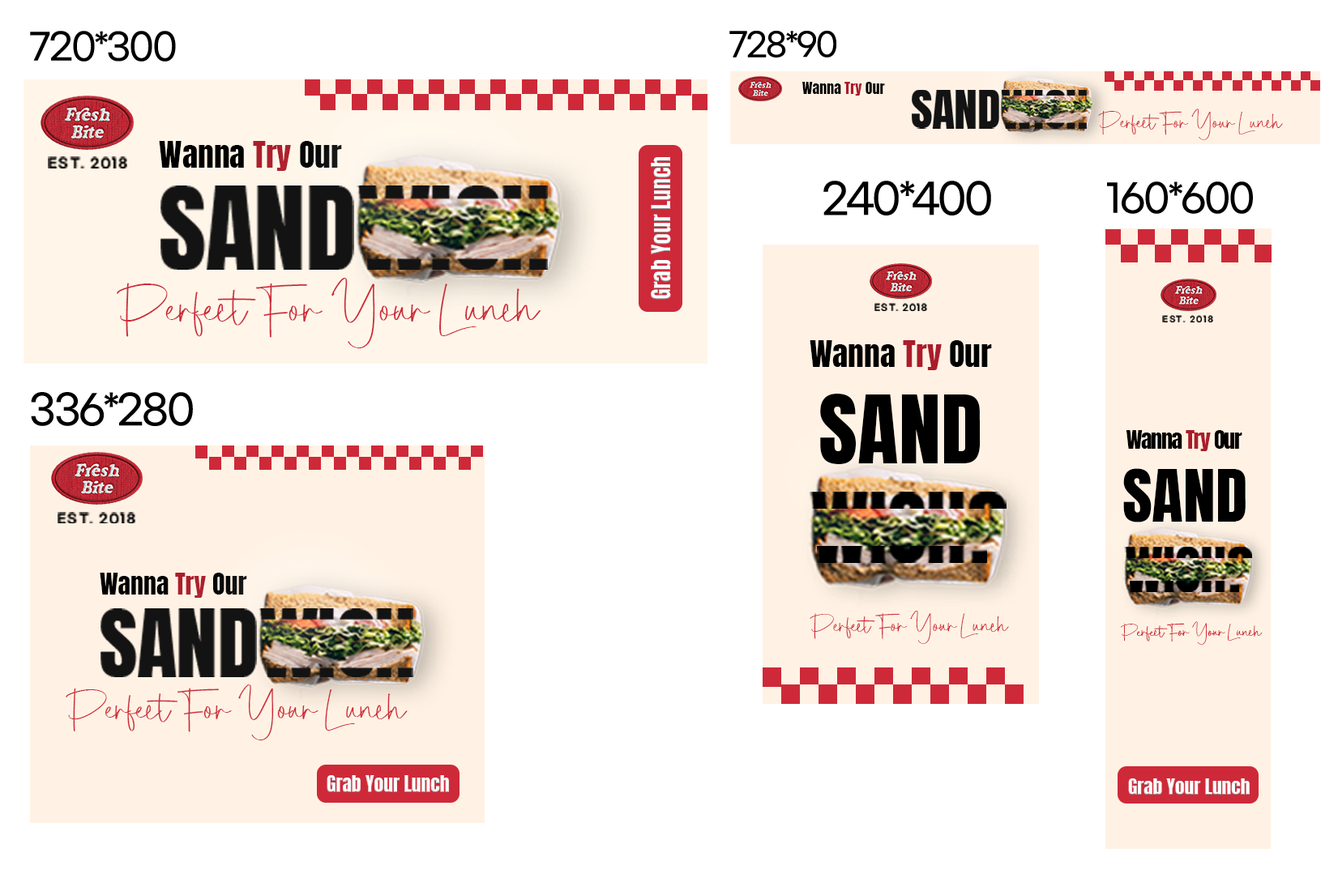
<style>
.page{position:relative;width:1338px;height:891px;background:#ffffff}
.page>*{position:absolute;margin:0}
.t1{font:35.8px "GmarketSansMedium";letter-spacing:-0.05em;color:#000000}
.t2{font:32px "GmarketSansMedium";letter-spacing:-0.05em;color:#000000}
.t3{font:13.8px "Anton-Regular";color:#000000;scale:1.05 1}
.t4{font:13.8px "Anton-Regular";color:#ab1c2a;scale:1.05 1}
.t5{font:28.1px "SabrinaDestiny";letter-spacing:-0.05em;color:#ce2939;scale:1.05 1}
.t6{font:30.5px "Anton-Regular";color:#000000;scale:1.05 1}
.t7{font:30.5px "Anton-Regular";color:#ab1c2a;scale:1.05 1}
.t8{font:12.6px "GmarketSansMedium";letter-spacing:0.15em;color:#000000}
.t9{font:22.2px "Anton-Regular";color:#ffffff}
.t10{font:41.5px "GmarketSansMedium";letter-spacing:-0.05em;color:#000000}
.t11{font:38.2px "GmarketSansMedium";letter-spacing:-0.05em;color:#000000}
.t12{font:64.6px "SabrinaDestiny";letter-spacing:-0.05em;color:#ce2939;scale:1.05 1}
.t13{font:8.3px "GmarketSansMedium";letter-spacing:0.15em;color:#000000}
.t14{font:7.5px "GmarketSansMedium";letter-spacing:0.2em;color:#000000}
.t15{font:30.5px "Anton-Regular";color:#000000;scale:1.06 1}
.t16{font:30.5px "Anton-Regular";color:#ab1c2a;scale:1.06 1}
.t17{font:40.4px "GmarketSansMedium";letter-spacing:-0.05em;color:#000000}
.t18{font:79.9px "Anton-Regular";color:#000000;scale:1.06 1}
.t19{font:21.7px "Anton-Regular";letter-spacing:-0.05em;color:#000000;scale:1.06 1}
.t20{font:21.7px "Anton-Regular";letter-spacing:-0.05em;color:#ab1c2a;scale:1.06 1}
.t21{font:61.2px "Anton-Regular";color:#000000;scale:1.06 1}
.t22{font:12.4px "GmarketSansMedium";letter-spacing:0.15em;color:#000000}
.t23{font:24.6px "Anton-Regular";color:#000000;scale:1.05 1}
.t24{font:24.6px "Anton-Regular";color:#ab1c2a;scale:1.05 1}
.t25{font:30.2px "SabrinaDestiny";letter-spacing:-0.05em;color:#ce2939;scale:1.05 1}
.t26{font:21.5px "SabrinaDestiny";letter-spacing:-0.05em;color:#ce2939;scale:1.05 1}
.t27{font:52.1px "SabrinaDestiny";letter-spacing:-0.05em;color:#ce2939;scale:1.05 1}
.t28{font:19.2px "Anton-Regular";color:#ffffff}
.t29{font:18.9px "Anton-Regular";color:#ffffff}
</style>
<div class="page">
<p class="t1" style="left:30px;top:31px;width:146px;height:31px">720*300</p>
<p class="t2" style="left:729px;top:31px;width:108px;height:27px">728*90</p>
<p class="t3" style="left:802px;top:82px;width:83px;height:14px">Wanna <span class="t4">Try </span>Our</p>
<p class="t5" style="left:1098px;top:109px;width:185px;height:31px">Perfect For Your Lunch</p>
<p class="t6" style="left:159px;top:141px;width:183px;height:30px">Wanna <span class="t7">Try </span>Our</p>
<p class="t8" style="left:48px;top:156px;width:79px;height:13px">EST. 2018</p>
<p class="t9" style="left:651px;top:157px;width:20px;height:143px;rotate:-90deg">Grab Your Lunch</p>
<p class="t10" style="left:823px;top:181px;width:168px;height:35px">240*400</p>
<p class="t11" style="left:1107px;top:182px;width:146px;height:32px">160*600</p>
<p class="t12" style="left:117px;top:278px;width:424px;height:70px">Perfect For Your Lunch</p>
<p class="t13" style="left:874px;top:303px;width:53px;height:8px">EST. 2018</p>
<p class="t14" style="left:1162px;top:315px;width:51px;height:8px">EST. 2018</p>
<p class="t15" style="left:809px;top:340px;width:183px;height:30px">Wanna <span class="t16">Try </span>Our</p>
<p class="t17" style="left:31px;top:392px;width:162px;height:34px">336*280</p>
<p class="t18" style="left:820px;top:394px;width:160px;height:70px">SAND</p>
<p class="t19" style="left:1126px;top:430px;width:116px;height:21px">Wanna <span class="t20">Try </span>Our</p>
<p class="t21" style="left:1123px;top:468px;width:122px;height:55px">SAND</p>
<p class="t22" style="left:58px;top:512px;width:77px;height:11px">EST. 2018</p>
<p class="t23" style="left:100px;top:573px;width:147px;height:25px">Wanna <span class="t24">Try </span>Our</p>
<p class="t25" style="left:809px;top:611px;width:200px;height:33px">Perfect For Your Lunch</p>
<p class="t26" style="left:1121px;top:622px;width:141px;height:23px">Perfect For Your Lunch</p>
<p class="t27" style="left:66px;top:685px;width:342px;height:56px">Perfect For Your Lunch</p>
<p class="t28" style="left:327px;top:775px;width:122px;height:17px">Grab Your Lunch</p>
<p class="t29" style="left:1128px;top:779px;width:121px;height:16px">Grab Your Lunch</p>
</div>
